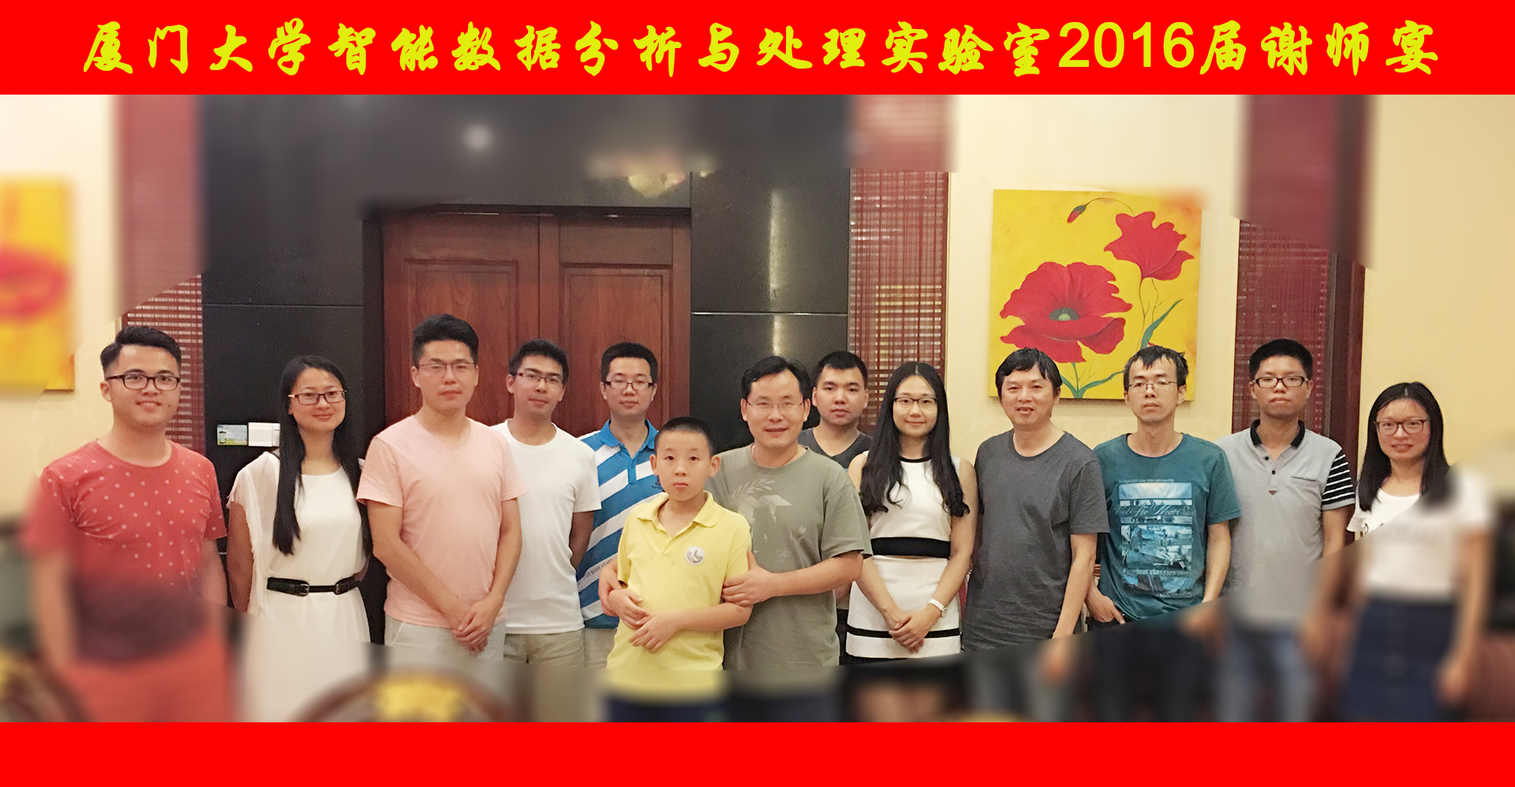
<style>
.page{position:relative;width:1515px;height:787px}
.page>*{position:absolute;margin:0}
.t1{font:59.9px "STXingkai";color:#e0ed0d;font-weight:bold}
.t2{font:59.9px "ArialMT";color:#e0ed0d;font-weight:bold}
</style>
<div class="page">
<p class="t1" style="left:84px;top:17px;width:1354px;height:60px">厦门大学智能数据分析与处理实验室<span class="t2">2016</span>届谢师宴</p>
</div>
